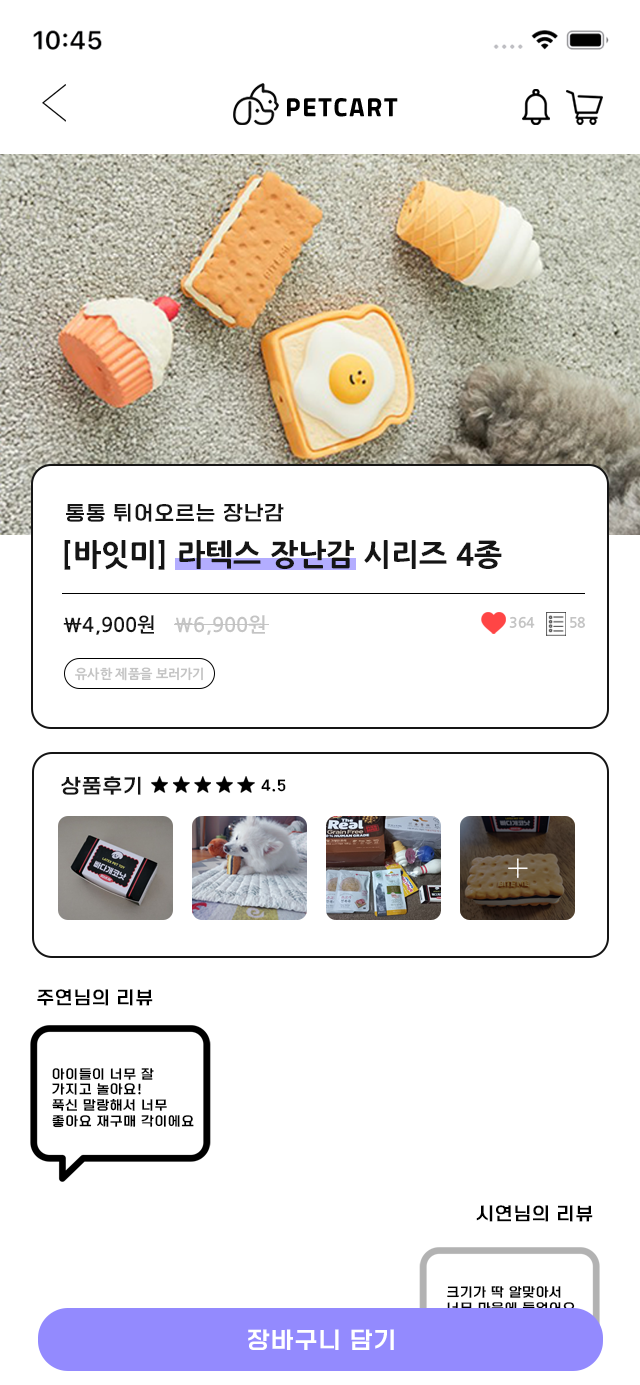
<style>
.page{position:relative;width:640px;height:1385px;background:#ffffff}
.page>*{position:absolute;margin:0}
.t1{font:20px "ONEMobileTitleRegular";letter-spacing:0.08em;color:#151515}
.t2{font:30px "NanumGothicOTFExtraBold";color:#151515}
.t3{font:20px "NanumGothicOTFBold";color:#151515}
.t4{font:20px "NanumGothicOTFBold";color:#c4c4c4}
.t5{font:14px "NanumGothicOTFBold";color:#c4c4c4}
.t6{font:13px "NanumGothicOTFBold";color:#c4c4c4}
.t7{font:14.6px "ONEMobileTitleRegular";letter-spacing:0.08em;color:#000000}
.t8{font:18px "ONEMobileTitleRegular";letter-spacing:0.08em;color:#000000}
.t9{font:13px "ONEMobileTitleRegular";letter-spacing:0.08em;color:#000000}
.t10{font:23px "ONEMobileTitleRegular";letter-spacing:0.08em;color:#ffffff}
</style>
<div class="page">
<p class="t1" style="left:66px;top:503px;width:218px;height:19px">통통 튀어오르는 장난감</p>
<p class="t2" style="left:64px;top:540px;width:438px;height:30px">[바잇미] 라텍스 장난감 시리즈 4종</p>
<p class="t3" style="left:63px;top:615px;width:91px;height:20px">\4,900원</p>
<p class="t4" style="left:174px;top:615px;width:91px;height:20px">\6,900원</p>
<p class="t5" style="left:509px;top:616px;width:26px;height:12px">364</p>
<p class="t5" style="left:570px;top:616px;width:15px;height:12px">58</p>
<p class="t6" style="left:75px;top:667px;width:128px;height:14px">유사한 제품을 보러가기</p>
<p class="t1" style="left:61px;top:776px;width:80px;height:19px">상품후기</p>
<p class="t7" style="left:261px;top:779px;width:25px;height:13px">4.5</p>
<p class="t8" style="left:37px;top:989px;width:116px;height:17px">주연님의 리뷰</p>
<p class="t9" style="left:52px;top:1068px;width:142px;height:60px">아이들이 너무 잘 <br>가지고 놀아요!<br>푹신 말랑해서 너무 <br>좋아요 재구매 각이에요</p>
<p class="t8" style="left:476px;top:1205px;width:117px;height:17px">시연님의 리뷰</p>
<p class="t9" style="left:447px;top:1286px;width:128px;height:28px">크기가 딱 알맞아서<br>너무 마음에 들었어요</p>
<p class="t10" style="left:248px;top:1329px;width:146px;height:21px">장바구니 담기</p>
</div>
